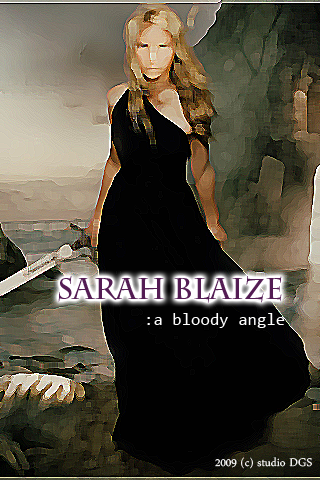
<style>
.page{position:relative;width:320px;height:480px}
.page>*{position:absolute;margin:0}
.t1{font:29.4px "CharlemagneStd-Bold";color:#541d54}
.t2{font:17.1px "Consolas";color:#ffffff}
.t3{font:16.3px "DaunPenh";color:#ffffff}
</style>
<div class="page">
<p class="t1" style="left:58px;top:276px;width:224px;height:27px">Sarah Blaize</p>
<p class="t2" style="left:147px;top:313px;width:138px;height:15px">:a bloody angle</p>
<p class="t3" style="left:215px;top:457px;width:97px;height:12px">2009 (c) studio DGS</p>
</div>
